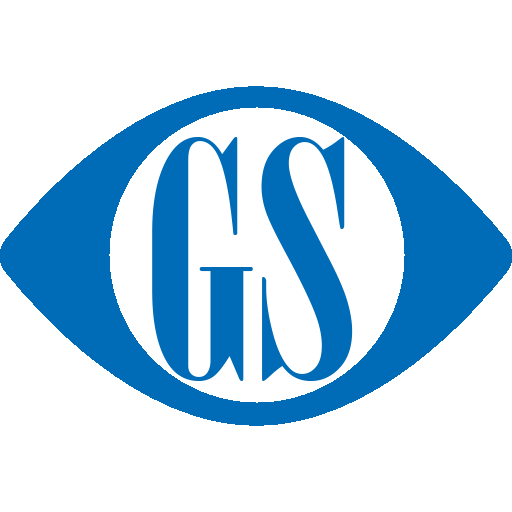
<style>
.page{position:relative;width:512px;height:512px;background:#ffffff}
.page>*{position:absolute;margin:0}
.t1{font:325.9px "Onyx";color:#006bb6;scale:1.06 1}
</style>
<div class="page">
<p class="t1" style="left:152px;top:137px;width:201px;height:244px">GS</p>
</div>
